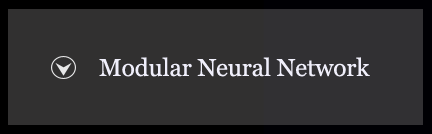
<style>
.page{position:relative;width:432px;height:134px;background:#313030}
.page>*{position:absolute;margin:0}
.t1{font:24.5px "Georgia";letter-spacing:-0.005em;color:#f0effb}
</style>
<div class="page">
<p class="t1" style="left:99px;top:57px;width:271px;height:20px">Modular Neural Network</p>
</div>
